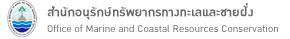
<style>
.page{position:relative;width:290px;height:39px;background:#ffffff}
.page>*{position:absolute;margin:0}
.t1{font:13.3px/16px "DBOzoneX";color:#676464}
.t2{font:16px/16px "DBOzoneX";color:#676464;font-weight:bold}
</style>
<div class="page">
<p class="t1" style="left:47px;top:3px;width:231px;height:29px"><span class="t2">สำนักอนุรักษ์ทรัพยากรทางทะเลและชายฝั่ง<br></span>Office of Marine and Coastal Resources Conservation</p>
</div>
